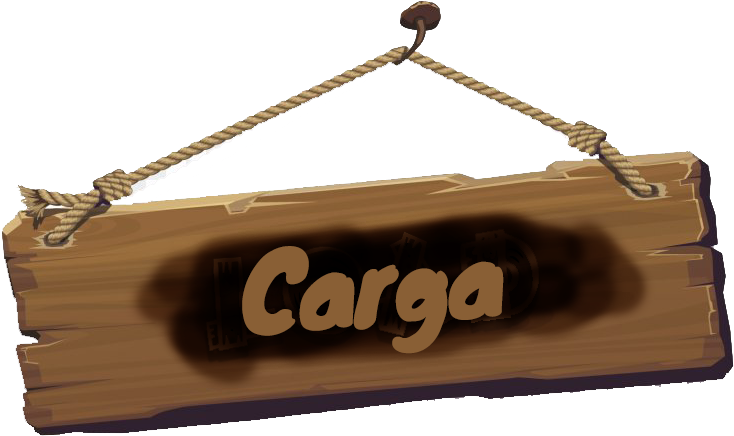
<style>
.page{position:relative;width:734px;height:436px;background:#ffffff}
.page>*{position:absolute;margin:0}
.t1{font:106.7px "Knewave-Regular";letter-spacing:-0.025em;color:#895f35}
</style>
<div class="page">
<p class="t1" style="left:242px;top:246px;width:262px;height:108px;rotate:-4deg">Carga</p>
</div>
